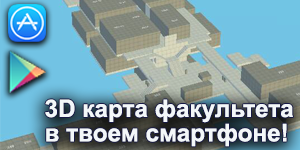
<style>
.page{position:relative;width:300px;height:150px}
.page>*{position:absolute;margin:0}
.t1{font:24.3px/24.3px "Arial-BoldMT";color:#f3f7f9}
</style>
<div class="page">
<p class="t1" style="left:45px;top:99px;width:248px;height:48px">3D карта факультета <br>в твоем смартфоне!</p>
</div>
